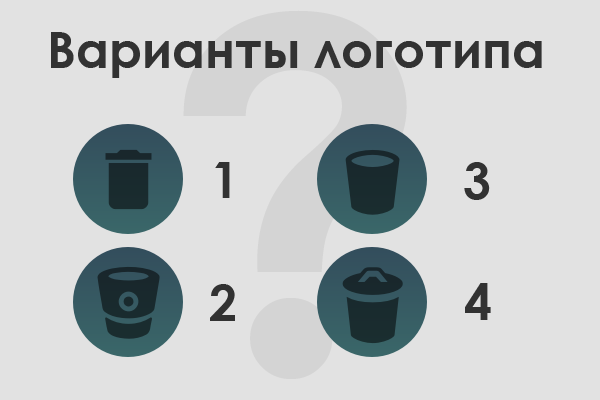
<style>
.page{position:relative;width:600px;height:400px;background:#e2e2e2}
.page>*{position:absolute;margin:0}
.t1{font:50px "CenturyGothic-Bold";color:#323232}
</style>
<div class="page">
<p class="t1" style="left:51px;top:32px;width:491px;height:46px">Варианты логотипа</p>
<p class="t1" style="left:215px;top:162px;width:15px;height:36px">1</p>
<p class="t1" style="left:464px;top:162px;width:26px;height:38px">3</p>
<p class="t1" style="left:210px;top:284px;width:25px;height:37px">2</p>
<p class="t1" style="left:465px;top:283px;width:26px;height:37px">4</p>
</div>
